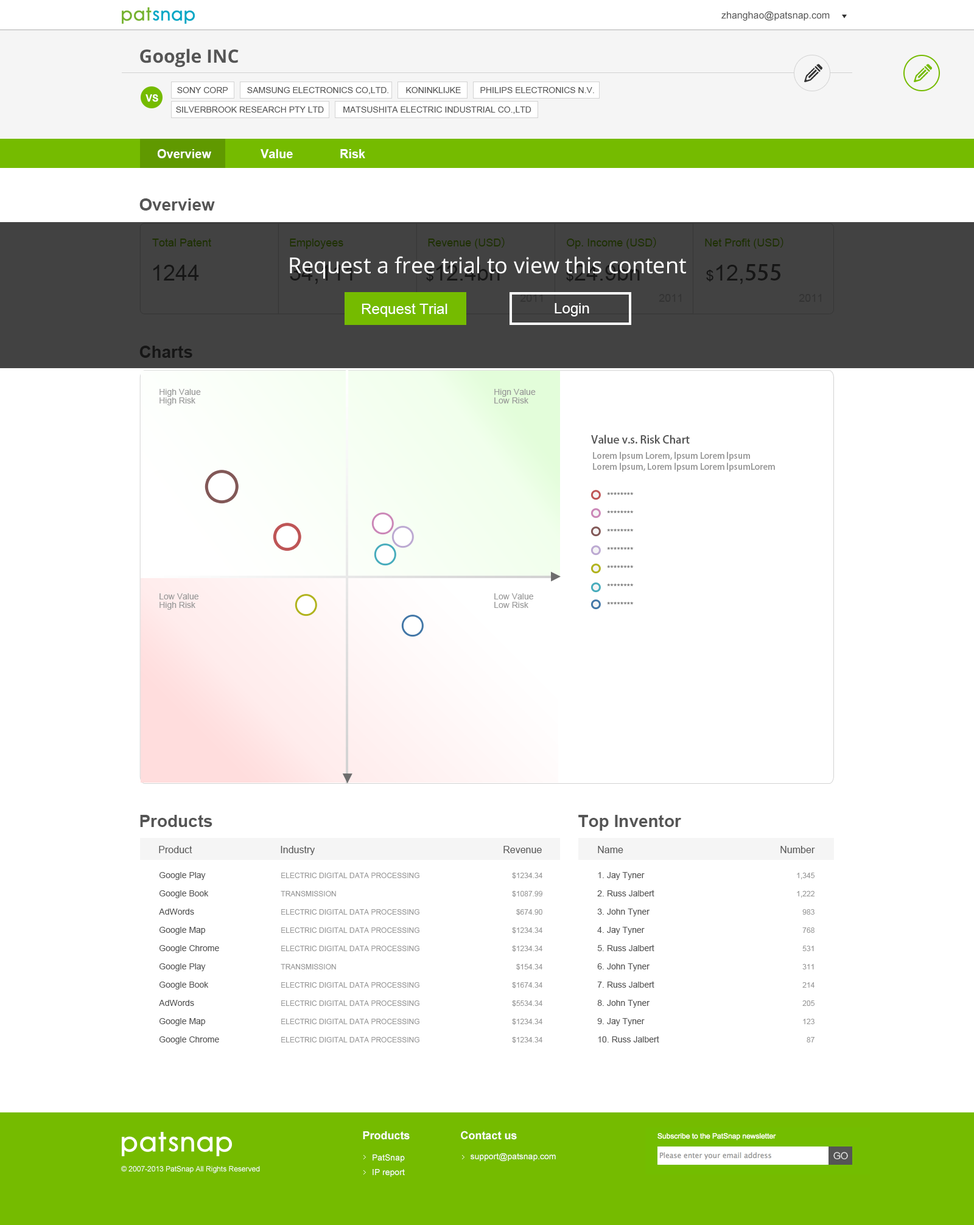
<style>
.page{position:relative;width:974px;height:1225px;background:#ffffff}
.page>*{position:absolute;margin:0}
.t1{font:9.7px "ArialMT";color:#555555}
.t2{font:18.3px "OpenSans-Bold";color:#555555}
.t3{font:8.5px "ArialMT";color:#555555}
.t4{font:9.7px "Arial-BoldMT";color:#ffffff}
.t5{font:12.2px "Arial-BoldMT";color:#ffffff}
.t6{font:17px "Arial-BoldMT";color:#555555}
.t7{font:10.9px "ArialMT";color:#1e3000}
.t8{font:10.9px "AdobeHeitiStd-Regular";color:#1e3000}
.t9{font:21.9px "OpenSans";color:#ffffff}
.t10{font:21.9px "ArialMT";color:#161616}
.t11{font:14.6px "ArialMT";color:#161616}
.t12{font:21.9px "AdobeHeitiStd-Regular";color:#161616}
.t13{font:10.9px "ArialMT";color:#333333}
.t14{font:14.6px "ArialMT";color:#ffffff}
.t15{font:17px "Arial-BoldMT";color:#161616}
.t16{font:8.5px "ArialMT";color:#999999}
.t17{font:10.9px "AdobeHeitiStd-Regular";color:#555555}
.t18{font:8.5px/10.9px "AdobeHeitiStd-Regular";color:#999999}
.t19{font:8.5px/18.3px "ArialMT";color:#555555}
.t20{font:7.3px/18.3px "ArialMT";color:#999999}
.t21{font:11px "Arial-BoldMT";color:#ffffff}
.t22{font:8.5px/2.4px "ArialMT";color:#ffffff}
.t23{font:8.5px "ArialMT";color:#ffffff}
.t24{font:7.3px "ArialMT";color:#ffffff}
</style>
<div class="page">
<p class="t1" style="left:721px;top:11px;width:108px;height:10px">zhanghao@patsnap.com</p>
<p class="t2" style="left:140px;top:49px;width:99px;height:19px">Google INC</p>
<p class="t3" style="left:177px;top:87px;width:417px;height:7px">SONY CORP        SAMSUNG ELECTRONICS CO,LTD.       KONINKLIJKE        PHILIPS ELECTRONICS N.V.</p>
<p class="t4" style="left:145px;top:94px;width:13px;height:8px">VS</p>
<p class="t3" style="left:176px;top:106px;width:355px;height:8px">SILVERBROOK RESEARCH PTY LTD        MATSUSHITA ELECTRIC INDUSTRIAL CO.,LTD</p>
<p class="t5" style="left:157px;top:149px;width:54px;height:9px">Overview</p>
<p class="t5" style="left:260px;top:149px;width:33px;height:9px">Value</p>
<p class="t5" style="left:340px;top:149px;width:25px;height:9px">Risk</p>
<p class="t6" style="left:139px;top:198px;width:76px;height:13px">Overview</p>
<p class="t7" style="left:152px;top:239px;width:59px;height:7px">Total Patent</p>
<p class="t7" style="left:290px;top:239px;width:53px;height:10px">Employees</p>
<p class="t7" style="left:428px;top:237px;width:76px;height:12px">Revenue (USD<span class="t8">）</span></p>
<p class="t7" style="left:566px;top:237px;width:90px;height:12px">Op. Income (USD<span class="t8">）</span></p>
<p class="t7" style="left:705px;top:237px;width:78px;height:12px">Net Profit (USD<span class="t8">）</span></p>
<p class="t9" style="left:290px;top:256px;width:396px;height:23px">Request a free trial to view this content</p>
<p class="t10" style="left:153px;top:265px;width:46px;height:16px">1244</p>
<p class="t10" style="left:706px;top:264px;width:74px;height:20px"><span class="t11">$</span>12,<span class="t12">555</span></p>
<p class="t13" style="left:658px;top:294px;width:23px;height:8px">2011</p>
<p class="t13" style="left:798px;top:294px;width:23px;height:8px">2011</p>
<p class="t14" style="left:361px;top:303px;width:86px;height:14px">Request Trial</p>
<p class="t14" style="left:554px;top:303px;width:35px;height:13px">Login</p>
<p class="t15" style="left:139px;top:346px;width:53px;height:12px">Charts</p>
<p class="t16" style="left:159px;top:389px;width:42px;height:8px">High Value</p>
<p class="t16" style="left:494px;top:389px;width:41px;height:8px">Hign Value</p>
<p class="t16" style="left:159px;top:397px;width:36px;height:8px">High Risk</p>
<p class="t16" style="left:494px;top:397px;width:34px;height:6px">Low Risk</p>
<p class="t17" style="left:591px;top:434px;width:98px;height:10px">Value v.s. Risk Chart</p>
<p class="t18" style="left:593px;top:451px;width:182px;height:21px">Lorem lpsum Lorem, lpsum Lorem lpsum<br>Lorem lpsum, Lorem lpsum Lorem lpsumLorem</p>
<p class="t19" style="left:607px;top:492px;width:26px;height:113px">********<br>********<br>********<br>********<br>********<br>********<br>********</p>
<p class="t16" style="left:159px;top:593px;width:39px;height:6px">Low Value</p>
<p class="t16" style="left:494px;top:593px;width:39px;height:6px">Low Value</p>
<p class="t16" style="left:159px;top:602px;width:36px;height:8px">High Risk</p>
<p class="t16" style="left:494px;top:602px;width:34px;height:6px">Low Risk</p>
<p class="t6" style="left:140px;top:815px;width:72px;height:12px">Products</p>
<p class="t6" style="left:578px;top:815px;width:103px;height:16px">Top Inventor</p>
<p class="t1" style="left:159px;top:846px;width:33px;height:7px">Product</p>
<p class="t1" style="left:281px;top:846px;width:34px;height:9px">Industry</p>
<p class="t1" style="left:503px;top:846px;width:39px;height:7px">Revenue</p>
<p class="t1" style="left:598px;top:846px;width:25px;height:7px">Name</p>
<p class="t1" style="left:780px;top:846px;width:35px;height:7px">Number</p>
<p class="t19" style="left:159px;top:872px;width:60px;height:172px">Google Play<br>Google Book<br>AdWords<br>Google Map<br>Google Chrome<br>Google Play<br>Google Book<br>AdWords<br>Google Map<br>Google Chrome</p>
<p class="t20" style="left:281px;top:873px;width:138px;height:169px">ELECTRIC DIGITAL DATA PROCESSING<br>TRANSMISSION<br>ELECTRIC DIGITAL DATA PROCESSING<br>ELECTRIC DIGITAL DATA PROCESSING<br>ELECTRIC DIGITAL DATA PROCESSING<br>TRANSMISSION<br>ELECTRIC DIGITAL DATA PROCESSING<br>ELECTRIC DIGITAL DATA PROCESSING<br>ELECTRIC DIGITAL DATA PROCESSING<br>ELECTRIC DIGITAL DATA PROCESSING</p>
<p class="t20" style="left:512px;top:873px;width:30px;height:170px;text-align:right">$1234.34<br>$1087.99<br>$674.90<br>$1234.34<br>$1234.34<br>$154.34<br>$1674.34<br>$5534.34<br>$1234.34<br>$1234.34</p>
<p class="t19" style="left:597px;top:872px;width:62px;height:170px">1. Jay Tyner<br>2. Russ Jalbert<br>3. John Tyner<br>4. Jay Tyner<br>5. Russ Jalbert<br>6. John Tyner<br>7. Russ Jalbert<br>8. John Tyner<br>9. Jay Tyner<br>10. Russ Jalbert</p>
<p class="t20" style="left:796px;top:873px;width:18px;height:169px;text-align:right">1,345<br>1,222<br>983<br>768<br>531<br>311<br>214<br>205<br>123<br>87</p>
<p class="t21" style="left:363px;top:1131px;width:46px;height:9px">Products</p>
<p class="t21" style="left:461px;top:1131px;width:56px;height:9px">Contact us</p>
<p class="t22" style="left:372px;top:1154px;width:33px;height:23px">PatSnap    <br>IP report</p>
<p class="t23" style="left:470px;top:1153px;width:86px;height:8px">support@patsnap.com</p>
<p class="t24" style="left:121px;top:1166px;width:139px;height:7px">© 2007-2013 PatSnap All Rights Reserved</p>
</div>
